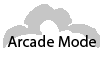
<style>
.page{position:relative;width:102px;height:61px;background:#ffffff}
.page>*{position:absolute;margin:0}
.t1{font:16px "MyriadPro-Regular";color:#000000}
</style>
<div class="page">
<p class="t1" style="left:7px;top:35px;width:89px;height:12px">Arcade Mode</p>
</div>
